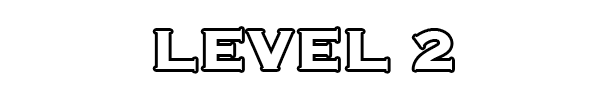
<style>
.page{position:relative;width:598px;height:100px;background:#ffffff}
.page>*{position:absolute;margin:0}
.t1{font:72px "Copperplate-Bold";color:#ffffff}
</style>
<div class="page">
<p class="t1" style="left:155px;top:29px;width:297px;height:42px">LEVEL 2</p>
</div>
